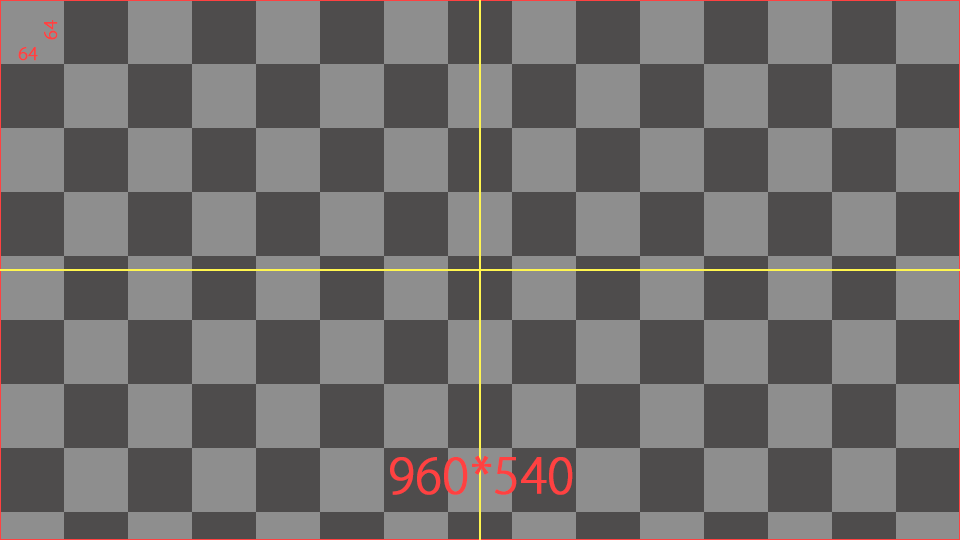
<style>
.page{position:relative;width:960px;height:540px;background:#8e8e8e}
.page>*{position:absolute;margin:0}
.t1{font:17.2px "KozGoPr6N-Light";color:#ff4141;font-weight:bold}
.t2{font:48px "KozGoPr6N-Light";color:#ff4141;font-weight:bold}
</style>
<div class="page">
<p class="t1" style="left:44px;top:20px;width:14px;height:20px;rotate:-90deg">64</p>
<p class="t1" style="left:18px;top:47px;width:20px;height:14px">64</p>
<p class="t2" style="left:390px;top:456px;width:183px;height:39px">960*540</p>
</div>
